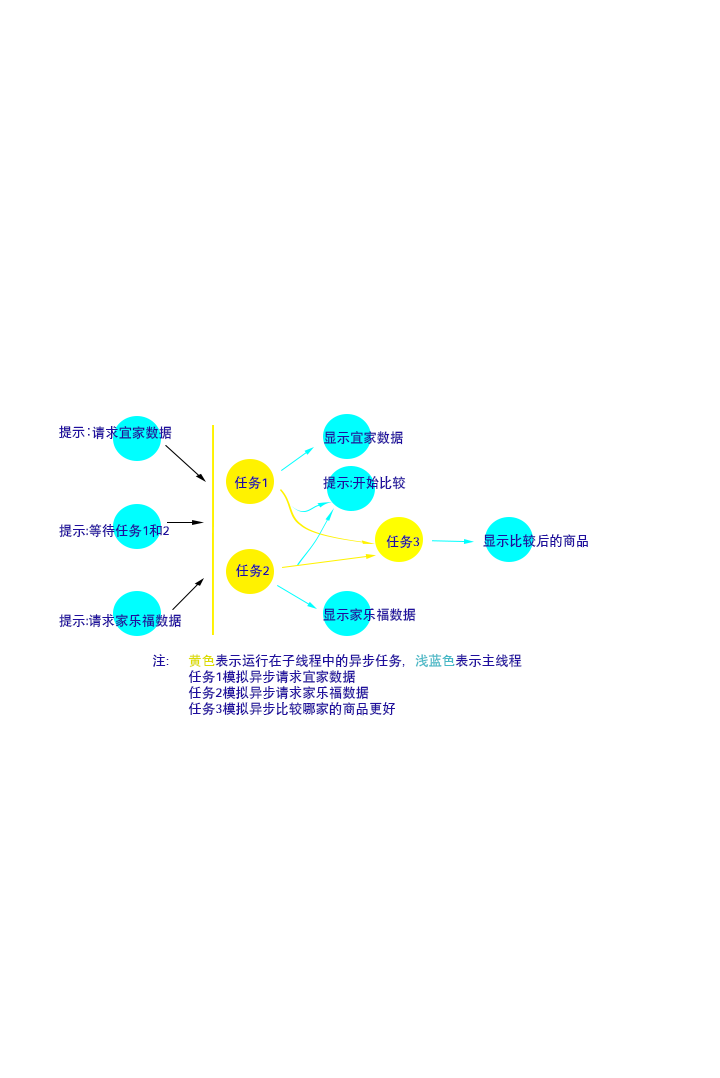
<style>
.page{position:relative;width:720px;height:1078px;background:#ffffff}
.page>*{position:absolute;margin:0}
.t1{font:13.3px "SIL-Hei-Med-Jian";color:#1f0e9e}
.t2{font:13.3px "HiraKakuProN-W3";color:#1f0e9e}
.t3{font:13.3px "SIL-Hei-Med-Jian";color:#dcdc00}
.t4{font:13.3px "SIL-Hei-Med-Jian";color:#44b8c6}
</style>
<div class="page">
<p class="t1" style="left:59px;top:425px;width:113px;height:15px"><span class="t2">提示：</span>请求宜家数据</p>
<p class="t1" style="left:324px;top:431px;width:79px;height:14px">显示宜家数据</p>
<p class="t1" style="left:234px;top:476px;width:33px;height:14px">任务1</p>
<p class="t1" style="left:323px;top:476px;width:83px;height:14px">提示:开始比较</p>
<p class="t1" style="left:59px;top:524px;width:110px;height:14px">提示:等待任务1和2</p>
<p class="t1" style="left:483px;top:534px;width:105px;height:14px">显示比较后的商品</p>
<p class="t1" style="left:386px;top:535px;width:34px;height:14px">任务3</p>
<p class="t1" style="left:236px;top:564px;width:33px;height:14px">任务2</p>
<p class="t1" style="left:59px;top:614px;width:123px;height:14px">提示:请求家乐福数据</p>
<p class="t1" style="left:323px;top:608px;width:93px;height:14px">显示家乐福数据</p>
<p class="t1" style="left:152px;top:653px;width:370px;height:63px">注： <span class="t3">黄色</span>表示运行在子线程中的异步任务，<span class="t4">浅蓝色</span>表示主线程<br> 任务1模拟异步请求宜家数据<br> 任务2模拟异步请求家乐福数据<br> 任务3模拟异步比较哪家的商品更好</p>
</div>
